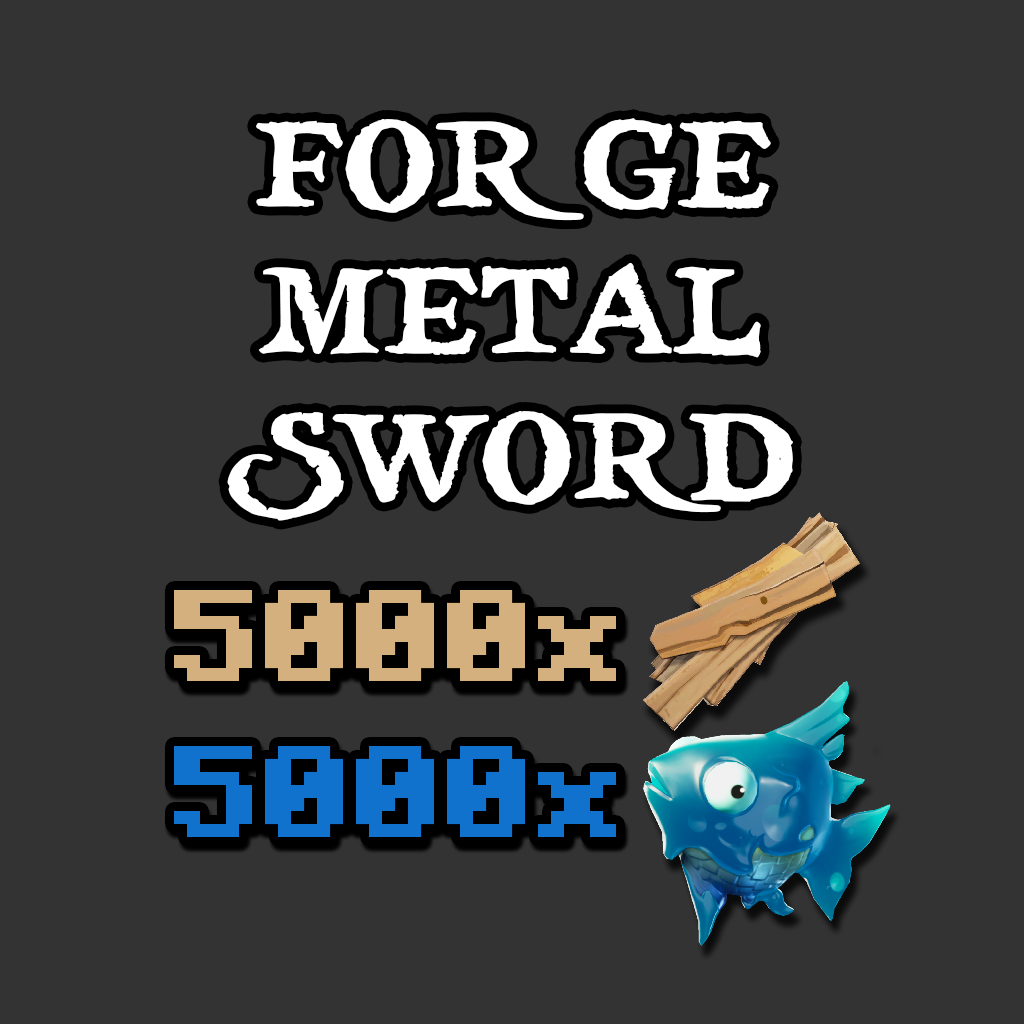
<style>
.page{position:relative;width:1024px;height:1024px;background:#333333}
.page>*{position:absolute;margin:0}
.t1{font:121.5px "treasuremap";color:#ffffff}
.t2{font:130px "Minecraft-Bold";color:#d4b07f}
.t3{font:130px "Minecraft-Bold";color:#1172cd}
</style>
<div class="page">
<p class="t1" style="left:227px;top:118px;width:566px;height:403px;text-align:center">FORGE<br>METAL<br>SWORD</p>
<p class="t2" style="left:174px;top:590px;width:442px;height:91px">5000x</p>
<p class="t3" style="left:174px;top:746px;width:442px;height:91px">5000x</p>
</div>
